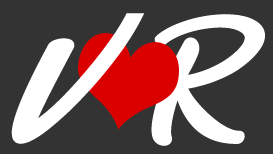
<style>
.page{position:relative;width:273px;height:154px;background:#333333}
.page>*{position:absolute;margin:0}
.t1{font:204px "sophia-script";letter-spacing:-0.01em;color:#ffffff}
.t2{font:160px "sophia-script";letter-spacing:-0.01em;color:#ffffff}
</style>
<div class="page">
<p class="t1" style="left:11px;top:13px;width:133px;height:131px">V</p>
<p class="t2" style="left:151px;top:14px;width:114px;height:132px">R</p>
</div>
